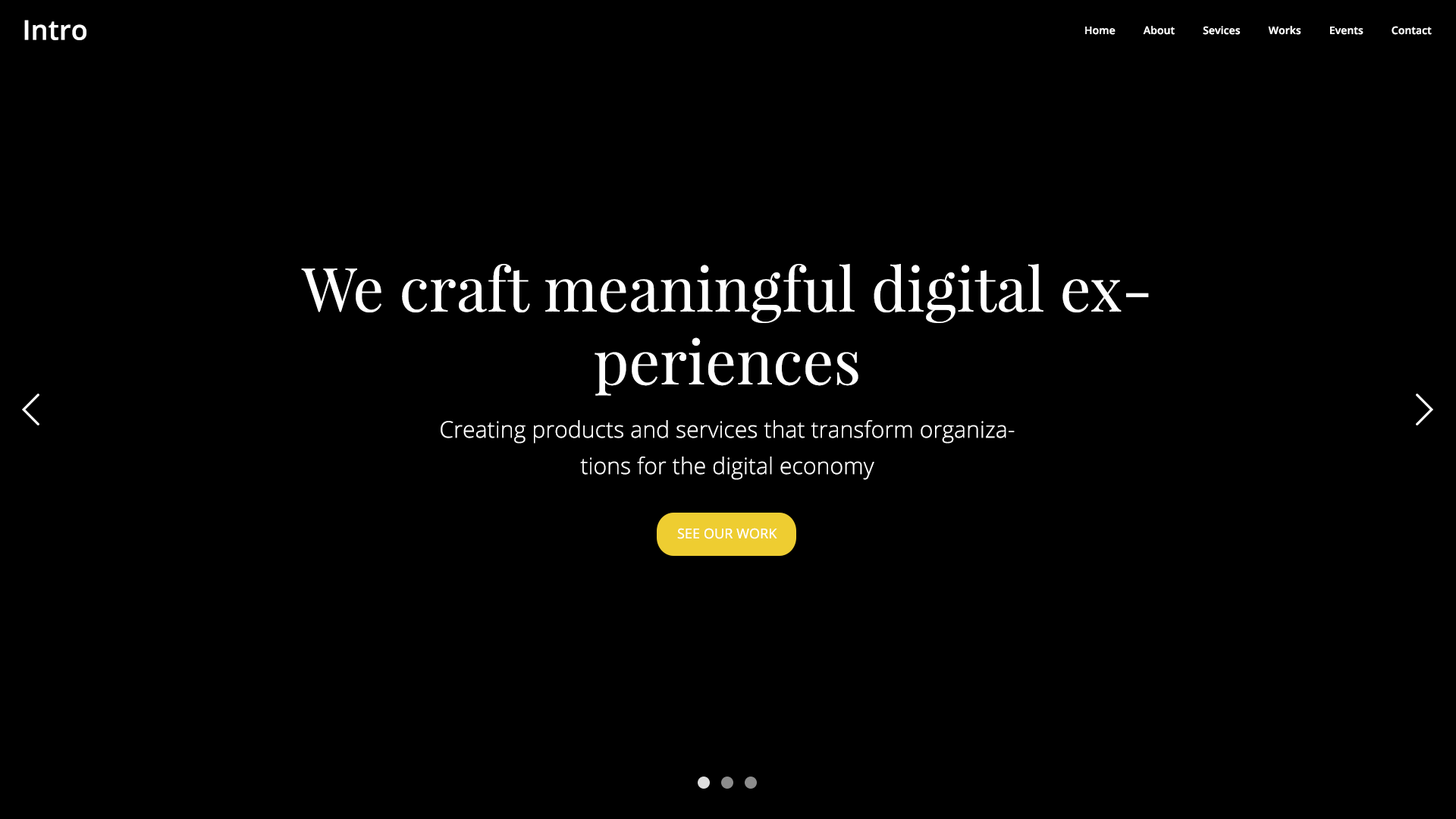
<style>
.page{position:relative;width:1456px;height:819px;background:#000000}
.page>*{position:absolute;margin:0}
.t1{font:27.3px "OpenSans-Semibold";letter-spacing:0.005em;color:#ffffff}
.t2{font:10.6px "OpenSans-Semibold";letter-spacing:0.005em;color:#ffffff}
.t3{font:60.7px "PlayfairDisplay-Regular";letter-spacing:0.005em;color:#ffffff}
.t4{font:22.7px/36.4px "OpenSans-Light";letter-spacing:0.005em;color:#ffffff}
.t5{font:13.7px "OpenSans";letter-spacing:0.005em;color:#ffffff}
</style>
<div class="page">
<p class="t1" style="left:24px;top:20px;width:62px;height:20px">Intro</p>
<p class="t2" style="left:1085px;top:26px;width:347px;height:9px">Home          About          Sevices          Works          Events          Contact</p>
<p class="t3" style="left:301px;top:264px;width:848px;height:132px;text-align:center">We craft meaningful digital experiences</p>
<p class="t4" style="left:441px;top:420px;width:574px;height:60px;text-align:center">Creating products and services that transform organizations for the digital economy</p>
<p class="t5" style="left:677px;top:528px;width:100px;height:11px">SEE OUR WORK</p>
</div>
